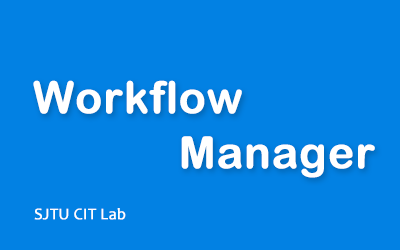
<style>
.page{position:relative;width:400px;height:250px;background:#0281e3}
.page>*{position:absolute;margin:0}
.t1{font:44px "ArialRoundedMTBold";color:#ffffff;font-weight:bold}
.t2{font:16px "Candara";color:#ffffff;font-weight:bold}
</style>
<div class="page">
<p class="t1" style="left:33px;top:80px;width:209px;height:34px">Workflow</p>
<p class="t1" style="left:181px;top:136px;width:194px;height:42px">Manager</p>
<p class="t2" style="left:34px;top:208px;width:92px;height:12px">SJTU CIT Lab</p>
</div>
